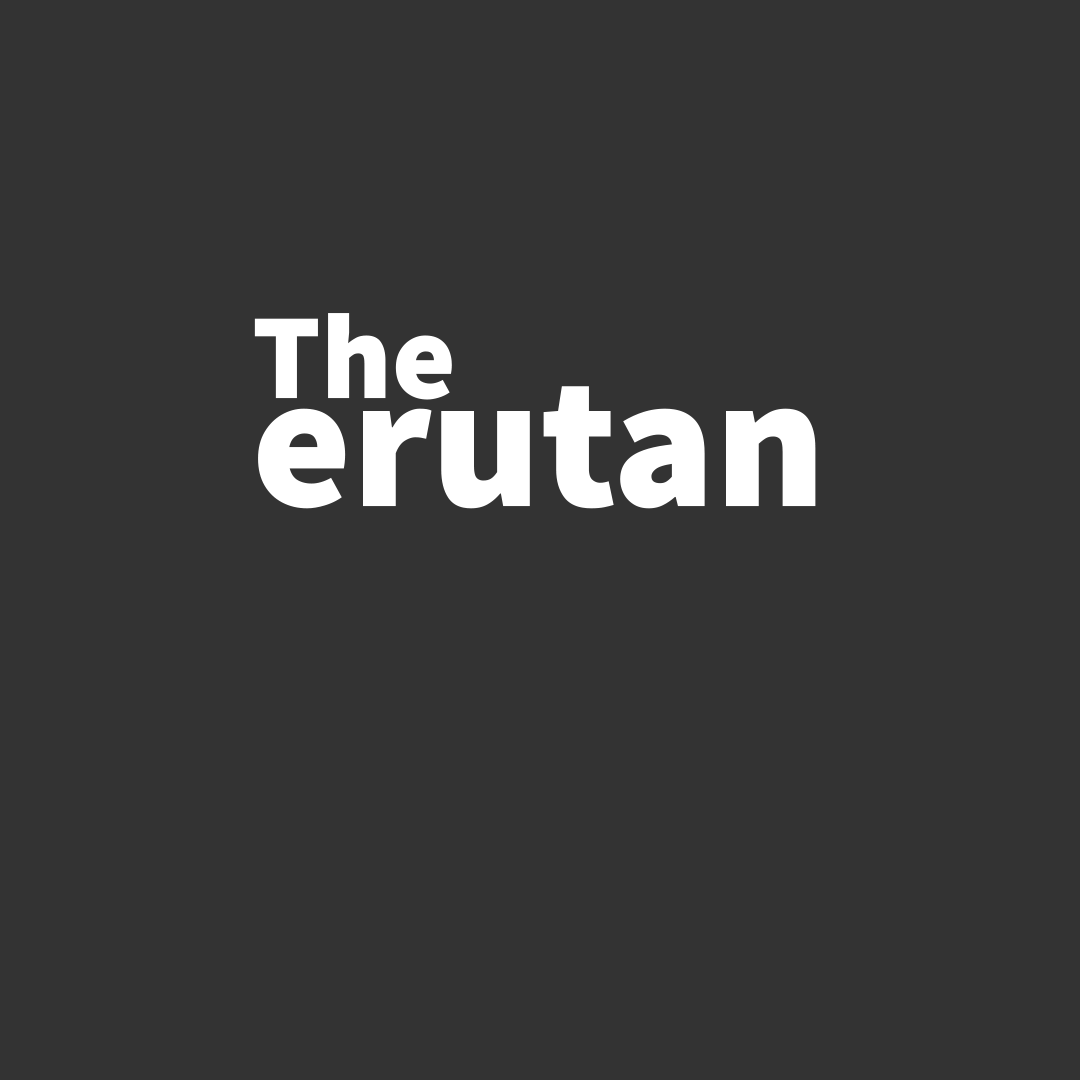
<style>
.page{position:relative;width:1080px;height:1080px;background:#333333}
.page>*{position:absolute;margin:0}
.t1{font:122px "SourceSansPro-Black";color:#ffffff}
.t2{font:190px "SourceSansPro-Black";color:#ffffff}
</style>
<div class="page">
<p class="t1" style="left:254px;top:313px;width:198px;height:87px">The</p>
<p class="t2" style="left:258px;top:386px;width:558px;height:123px">erutan</p>
</div>
